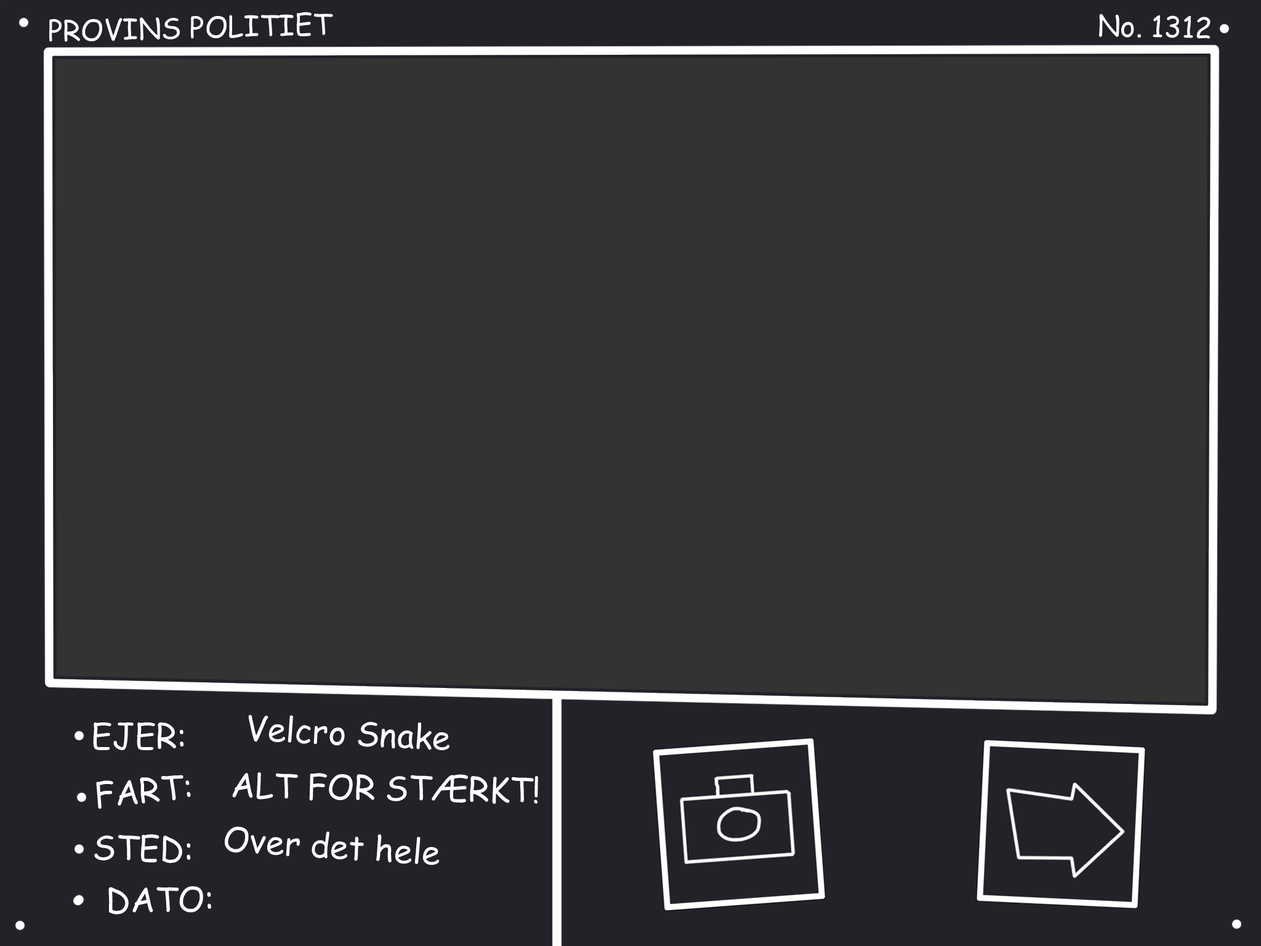
<style>
.page{position:relative;width:1261px;height:946px;background:#333333}
.page>*{position:absolute;margin:0}
.t1{font:28.8px "ComicSansMS";color:#ffffff}
.t2{font:33.6px "ComicSansMS";color:#ffffff}
</style>
<div class="page">
<p class="t1" style="left:49px;top:12px;width:284px;height:30px;rotate:-1deg">PROVINS POLITIET</p>
<p class="t1" style="left:1099px;top:14px;width:111px;height:25px;rotate:2deg">No. 1312</p>
<p class="t2" style="left:93px;top:722px;width:91px;height:28px">EJER:</p>
<p class="t2" style="left:248px;top:714px;width:201px;height:36px;rotate:3deg">Velcro Snake</p>
<p class="t2" style="left:232px;top:771px;width:306px;height:33px;rotate:1deg">ALT FOR STÆRKT!</p>
<p class="t2" style="left:96px;top:775px;width:95px;height:34px;rotate:-5deg">FART:</p>
<p class="t2" style="left:94px;top:834px;width:97px;height:29px;rotate:1deg">STED:</p>
<p class="t2" style="left:225px;top:826px;width:214px;height:39px;rotate:4deg">Over det hele</p>
<p class="t2" style="left:108px;top:886px;width:103px;height:28px;rotate:-1deg">DATO:</p>
</div>
